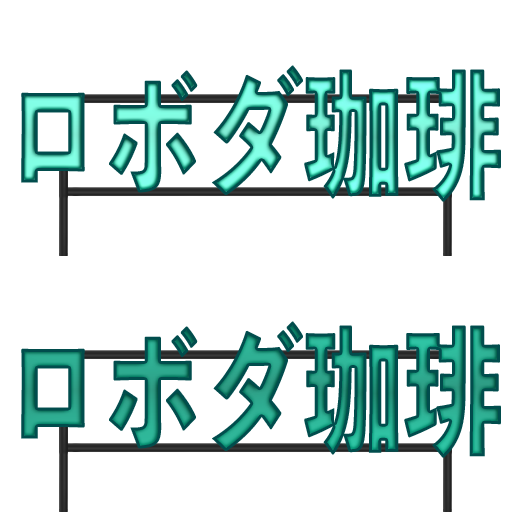
<style>
.page{position:relative;width:512px;height:512px;background:#ffffff}
.page>*{position:absolute;margin:0}
.t1{font:139px "ToppanBunkyuMidashiGothicStdN-ExtraBold";scale:0.72 1}
</style>
<div class="page">
<p class="t1" style="left:21px;top:65px;width:480px;height:137px">ロボダ珈琲</p>
<p class="t1" style="left:21px;top:321px;width:480px;height:137px">ロボダ珈琲</p>
</div>
